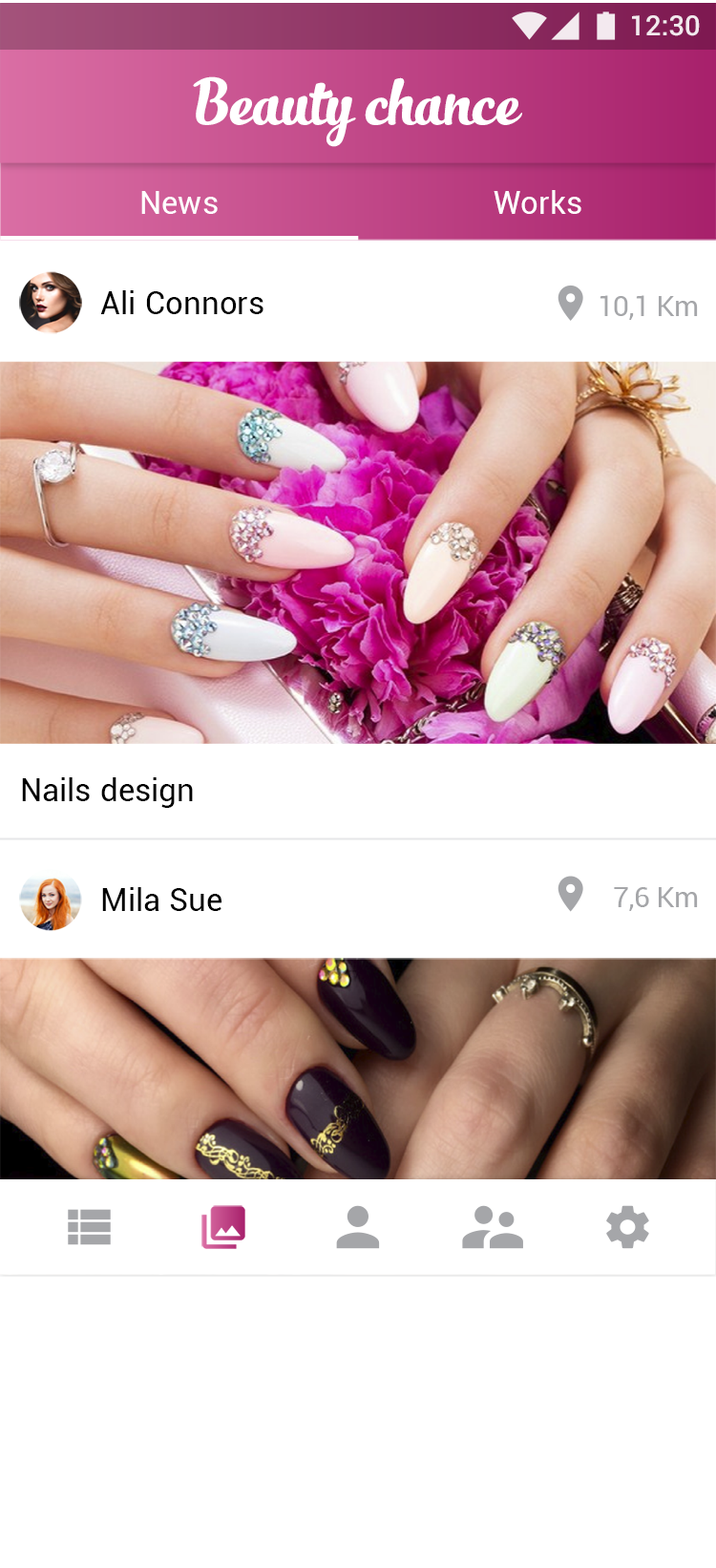
<style>
.page{position:relative;width:716px;height:1568px;background:#ffffff}
.page>*{position:absolute;margin:0}
.t1{font:27.8px "Roboto-Medium";color:#ffffff}
.t2{font:47.7px "SlimTony-Italic";color:#ffffff}
.t3{font:31.8px "Roboto-Regular";color:#ffffff}
.t4{font:31.8px "Roboto-Regular";letter-spacing:0.01em;color:#000000}
.t5{font:28.6px "Roboto-Regular";letter-spacing:-0.015em;color:#a5a6a9}
</style>
<div class="page">
<p class="t1" style="left:632px;top:15px;width:68px;height:21px">12:30</p>
<p class="t2" style="left:193px;top:76px;width:329px;height:71px">Beauty chance</p>
<p class="t3" style="left:141px;top:191px;width:77px;height:23px">News</p>
<p class="t3" style="left:494px;top:190px;width:88px;height:24px">Works</p>
<p class="t4" style="left:100px;top:290px;width:164px;height:24px">Ali Connors</p>
<p class="t5" style="left:600px;top:295px;width:98px;height:25px">10,1 Km</p>
<p class="t4" style="left:22px;top:777px;width:171px;height:31px">Nails design</p>
<p class="t4" style="left:102px;top:887px;width:120px;height:24px">Mila Sue</p>
<p class="t5" style="left:614px;top:887px;width:84px;height:24px">7,6 Km</p>
</div>
